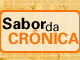
<style>
.page{position:relative;width:80px;height:60px}
.page>*{position:absolute;margin:0}
.t1{font:15.6px "Univers-Bold";color:#000000}
.t2{font:15.6px "Univers-Bold";color:#f6740a}
.t3{font:12.5px "Univers";color:#000000}
</style>
<div class="page">
<p class="t1" style="left:2px;top:17px;width:44px;height:13px">Sabor</p>
<p class="t2" style="left:8px;top:29px;width:71px;height:16px">CRÔNICA</p>
<p class="t3" style="left:45px;top:22px;width:14px;height:10px">da</p>
</div>
